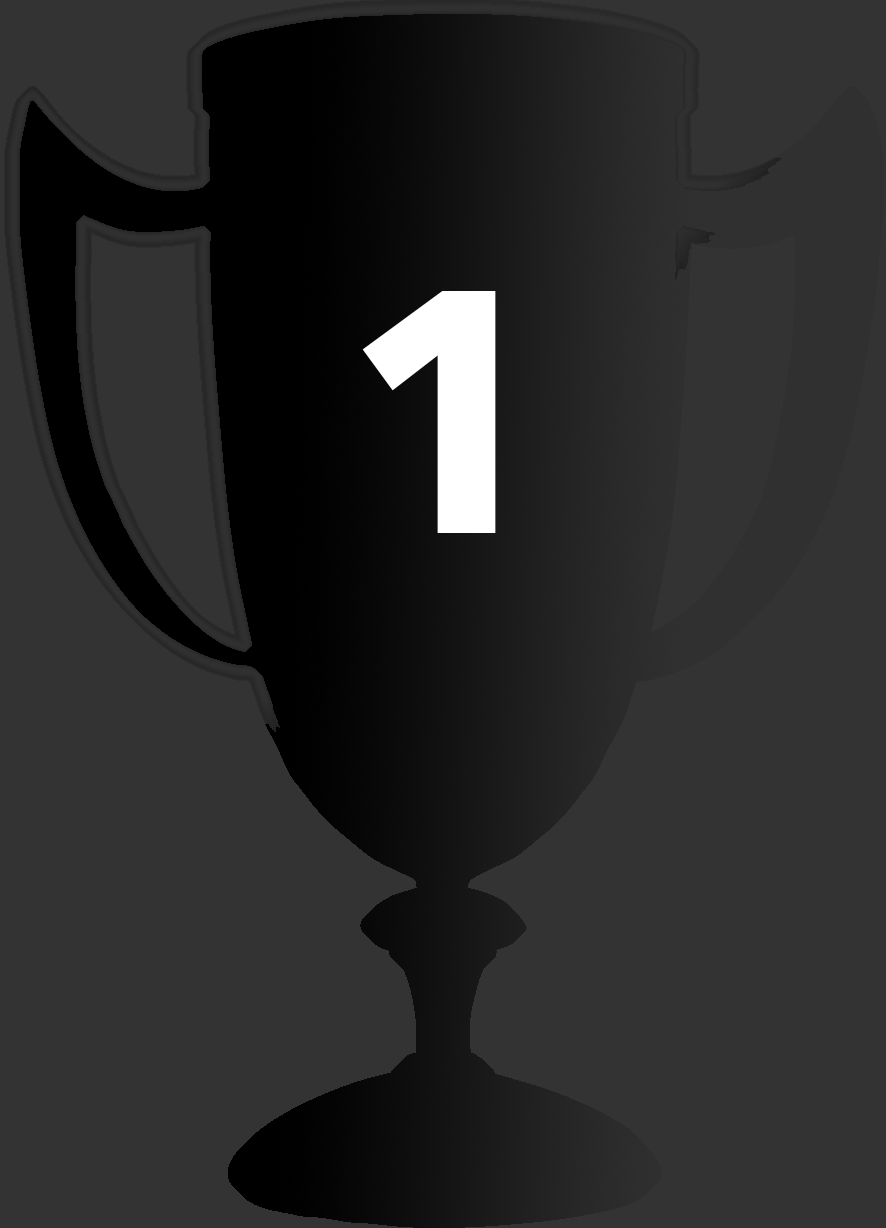
<style>
.page{position:relative;width:886px;height:1228px;background:#333333}
.page>*{position:absolute;margin:0}
.t1{font:341.7px "AvenirNext-Bold";color:#ffffff}
</style>
<div class="page">
<p class="t1" style="left:362px;top:291px;width:134px;height:242px">1</p>
</div>
